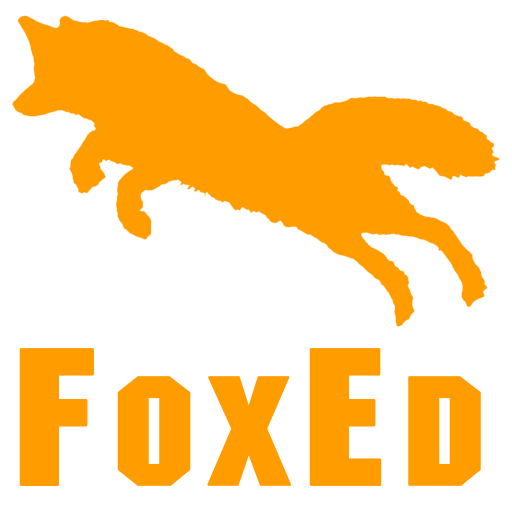
<style>
.page{position:relative;width:512px;height:512px;background:#ffffff}
.page>*{position:absolute;margin:0}
.t1{font:150px "MachineStd";letter-spacing:0.05em;color:#ff9c00;font-weight:bold;scale:1.19 1}
.t2{font:189.7px "MachineStd";letter-spacing:0.05em;color:#ff9c00;font-weight:bold;scale:1.19 1}
</style>
<div class="page">
<p class="t1" style="left:19px;top:348px;width:462px;height:138px"><span class="t2">F</span>ox<span class="t2">E</span>d</p>
</div>
